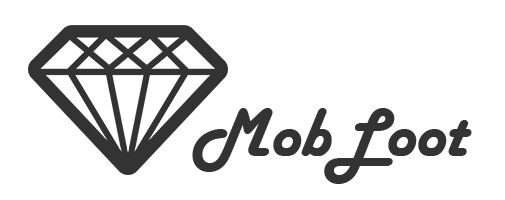
<style>
.page{position:relative;width:505px;height:200px;background:#ffffff}
.page>*{position:absolute;margin:0}
.t1{font:72px "HarlowSolid";color:#333333}
</style>
<div class="page">
<p class="t1" style="left:192px;top:108px;width:280px;height:76px">MobLoot</p>
</div>
